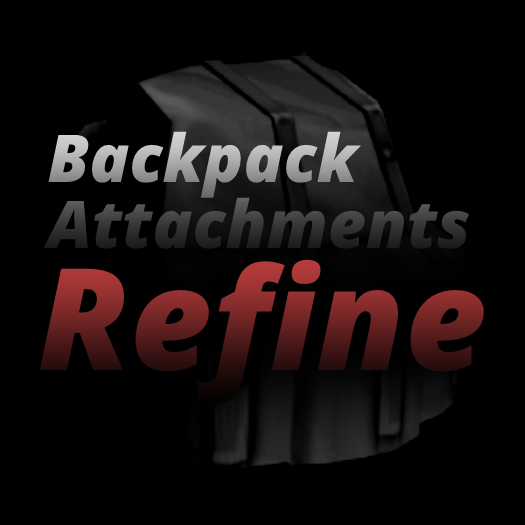
<style>
.page{position:relative;width:525px;height:525px;background:#000000}
.page>*{position:absolute;margin:0}
.t1{font:66px/66px "OpenSans-ExtraboldItalic"}
.t2{font:142px "OpenSans-ExtraboldItalic"}
</style>
<div class="page">
<p class="t1" style="left:43px;top:131px;width:427px;height:118px">Backpack<br>Attachments</p>
<p class="t2" style="left:39px;top:259px;width:445px;height:146px">Refine</p>
</div>
